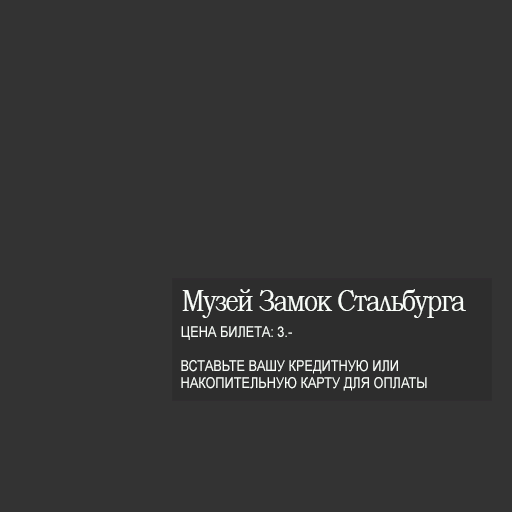
<style>
.page{position:relative;width:512px;height:512px;background:#333333}
.page>*{position:absolute;margin:0}
.t1{font:31px "BookmanOldStyle";letter-spacing:-0.06em;color:#f8fcf8;scale:0.81 1}
.t2{font:15px "ArialMT";color:#f8fcf8;scale:0.85 1}
.t3{font:15px/17px "ArialMT";color:#f8fcf8;scale:0.85 1}
</style>
<div class="page">
<p class="t1" style="left:182px;top:289px;width:284px;height:29px">Музей Замок Стальбурга</p>
<p class="t2" style="left:181px;top:326px;width:111px;height:14px">ЦЕНА БИЛЕТА: 3.-</p>
<p class="t3" style="left:181px;top:360px;width:246px;height:31px">ВСТАВЬТЕ ВАШУ КРЕДИТНУЮ ИЛИ<br>НАКОПИТЕЛЬНУЮ КАРТУ ДЛЯ ОПЛАТЫ</p>
</div>
